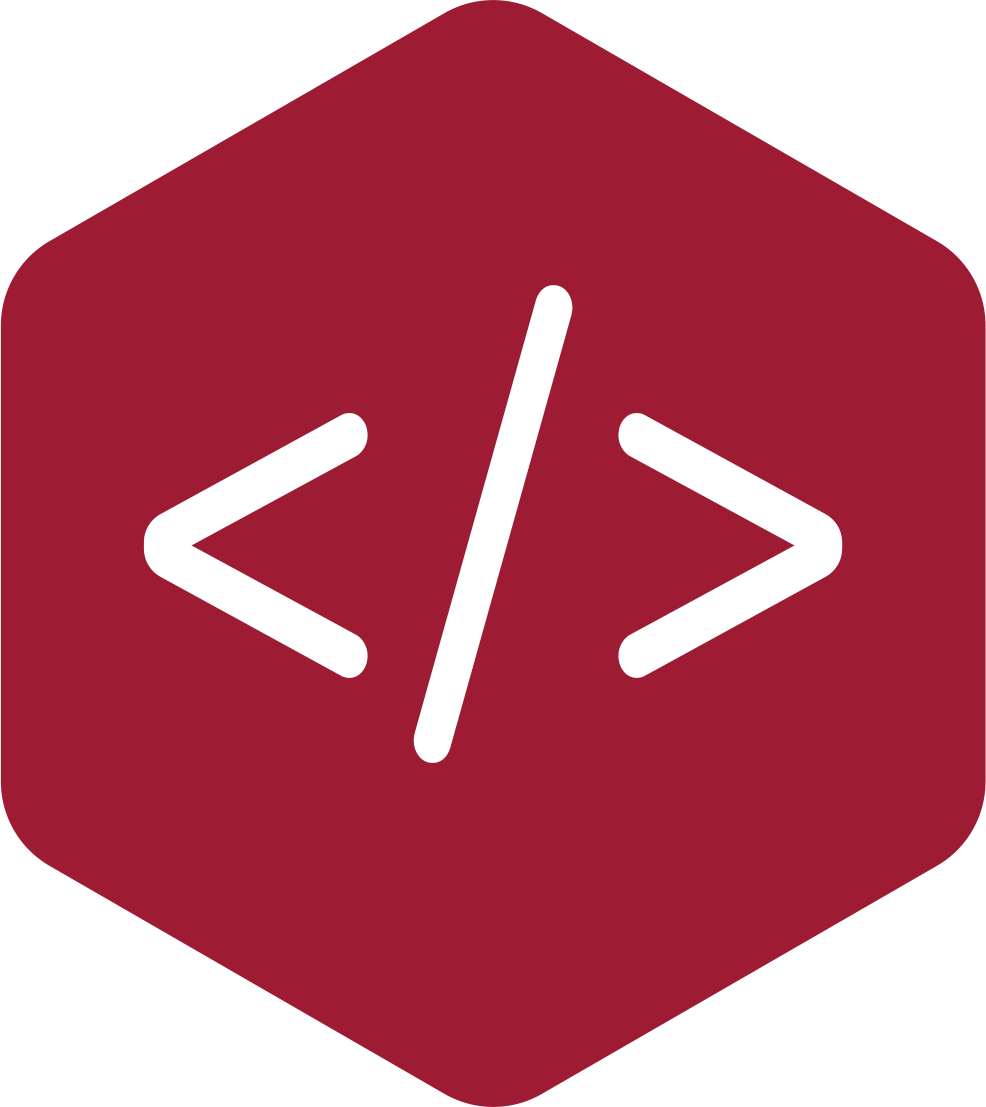
<style>
.page{position:relative;width:986px;height:1107px;background:#9e1b34}
.page>*{position:absolute;margin:0}
.t1{font:555.9px "VarelaRound-Regular";color:#ffffff;scale:0.82 1}
</style>
<div class="page">
<p class="t1" style="left:143px;top:285px;width:700px;height:478px">&lt;/&gt;</p>
</div>
